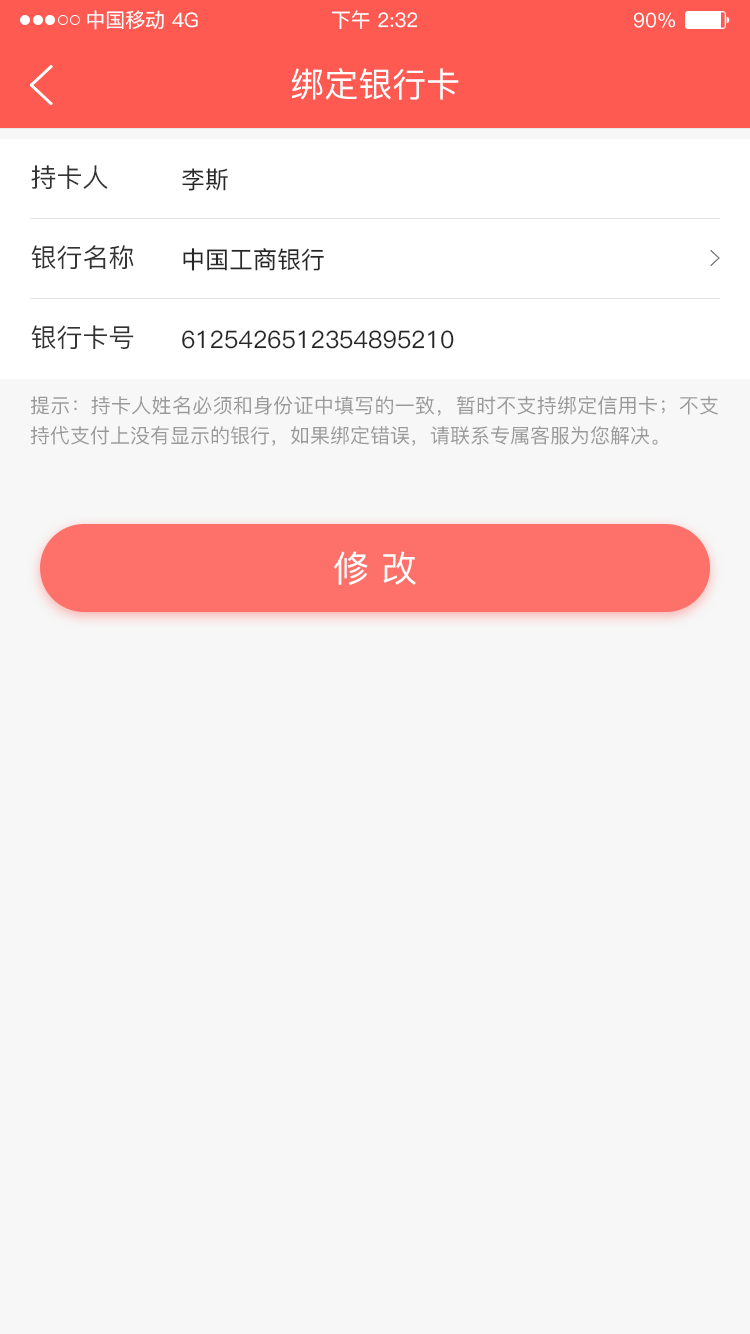
<style>
.page{position:relative;width:750px;height:1334px;background:#f7f7f7}
.page>*{position:absolute;margin:0}
.t1{font:20px "PingFang-SC-Medium";color:#ffffff}
.t2{font:34px "PingFang-SC-Medium";color:#ffffff}
.t3{font:26px "PingFang-SC-Medium";color:#333333}
.t4{font:24px "PingFang-SC-Medium";color:#262626}
.t5{font:20px/30px "PingFang-SC-Medium";color:#999999}
.t6{font:36px "PingFang-SC-Medium";color:#ffffff}
</style>
<div class="page">
<p class="t1" style="left:87px;top:10px;width:77px;height:20px">中国移动</p>
<p class="t1" style="left:172px;top:12px;width:26px;height:16px">4G</p>
<p class="t1" style="left:331px;top:10px;width:87px;height:20px">下午 2:32</p>
<p class="t1" style="left:634px;top:12px;width:41px;height:16px">90%</p>
<p class="t2" style="left:291px;top:68px;width:168px;height:32px">绑定银行卡</p>
<p class="t3" style="left:31px;top:165px;width:77px;height:24px">持卡人</p>
<p class="t4" style="left:182px;top:168px;width:46px;height:23px">李斯</p>
<p class="t3" style="left:31px;top:245px;width:103px;height:24px">银行名称</p>
<p class="t4" style="left:183px;top:248px;width:141px;height:23px">中国工商银行</p>
<p class="t3" style="left:31px;top:325px;width:103px;height:24px">银行卡号</p>
<p class="t4" style="left:182px;top:330px;width:272px;height:19px">6125426512354895210</p>
<p class="t5" style="left:30px;top:396px;width:688px;height:50px;text-align:justify">提示：持卡人姓名必须和身份证中填写的一致，暂时不支持绑定信用卡；不支持代支付上没有显示的银行，如果绑定错误，请联系专属客服为您解决。</p>
<p class="t6" style="left:334px;top:551px;width:82px;height:34px">修 改</p>
</div>
